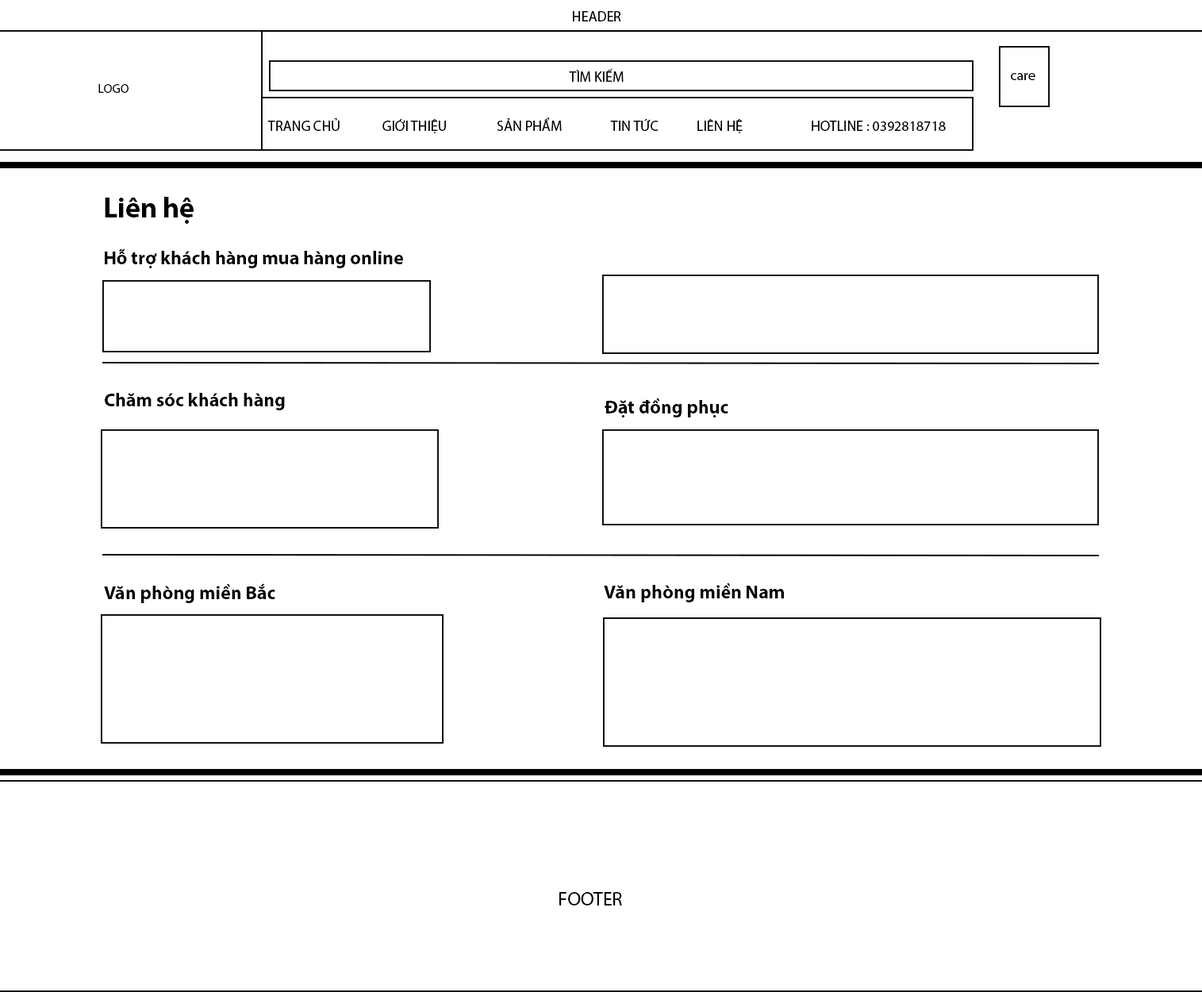
<style>
.page{position:relative;width:1202px;height:992px;background:#ffffff}
.page>*{position:absolute;margin:0}
.t1{font:14.3px "MyriadPro-Regular";color:#000000}
.t2{font:12.7px "MyriadPro-Regular";color:#000000}
.t3{font:28.3px "MyriadPro-Bold";color:#000000}
.t4{font:18.9px "MyriadPro-Bold";color:#000000}
.t5{font:19px "MyriadPro-Regular";color:#000000;text-transform:uppercase}
</style>
<div class="page">
<p class="t1" style="left:573px;top:11px;width:48px;height:10px">HEADER</p>
<p class="t1" style="left:569px;top:68px;width:55px;height:14px">TÌM KIẾM</p>
<p class="t1" style="left:1011px;top:73px;width:25px;height:7px">care</p>
<p class="t2" style="left:98px;top:84px;width:31px;height:9px">LOGO</p>
<p class="t1" style="left:267px;top:117px;width:679px;height:16px">TRANG CHỦ   GIỚI THIỆU  SẢN PHẨM   TIN TỨC  LIÊN HỆ   HOTLINE : 0392818718</p>
<p class="t3" style="left:105px;top:197px;width:89px;height:27px">Liên hệ</p>
<p class="t4" style="left:105px;top:249px;width:298px;height:20px">Hỗ trợ khách hàng mua hàng online</p>
<p class="t4" style="left:105px;top:393px;width:180px;height:17px">Chăm sóc khách hàng</p>
<p class="t4" style="left:605px;top:398px;width:123px;height:20px">Đặt đồng phục</p>
<p class="t4" style="left:104px;top:583px;width:171px;height:20px">Văn phòng miền Bắc</p>
<p class="t4" style="left:604px;top:583px;width:180px;height:19px">Văn phòng miền Nam</p>
<p class="t5" style="left:559px;top:892px;width:63px;height:13px">footer</p>
</div>
